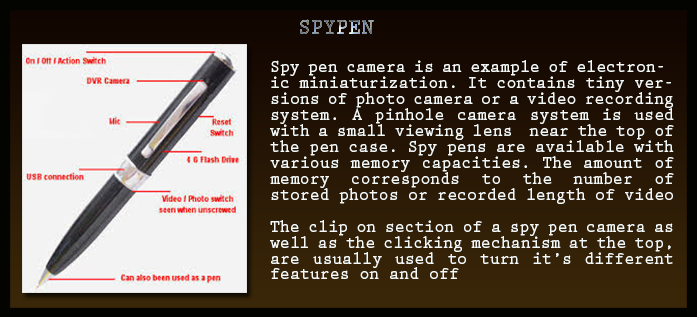
<style>
.page{position:relative;width:697px;height:317px}
.page>*{position:absolute;margin:0}
.t1{font:22.4px "PrestigeEliteStd-Bd";letter-spacing:0.002em;scale:0.94 1}
.t2{font:17.6px/16px "PrestigeEliteStd-Bd";letter-spacing:0.002em;color:#f4f8f6;scale:0.94 1}
</style>
<div class="page">
<p class="t1" style="left:300px;top:19px;width:74px;height:15px">SPYPEN</p>
<p class="t2" style="left:270px;top:60px;width:404px;height:219px;text-align:justify">Spy pen camera is an example of electronic miniaturization. It contains tiny versions of photo camera or a video recording system. A pinhole camera system is used with a small viewing lens  near the top of the pen case. Spy pens are available with various memory capacities. The amount of memory corresponds to the number of stored photos or recorded length of video<br><br>The clip on section of a spy pen camera as well as the clicking mechanism at the top, are usually used to turn it’s different features on and off</p>
</div>
